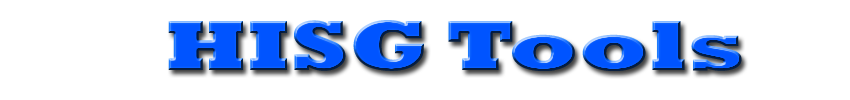
<style>
.page{position:relative;width:850px;height:100px;background:#ffffff}
.page>*{position:absolute;margin:0}
.t1{font:72px "Rockwell-ExtraBold";color:#0054ff;scale:1.31 1}
</style>
<div class="page">
<p class="t1" style="left:168px;top:20px;width:574px;height:51px">HISG Tools</p>
</div>
